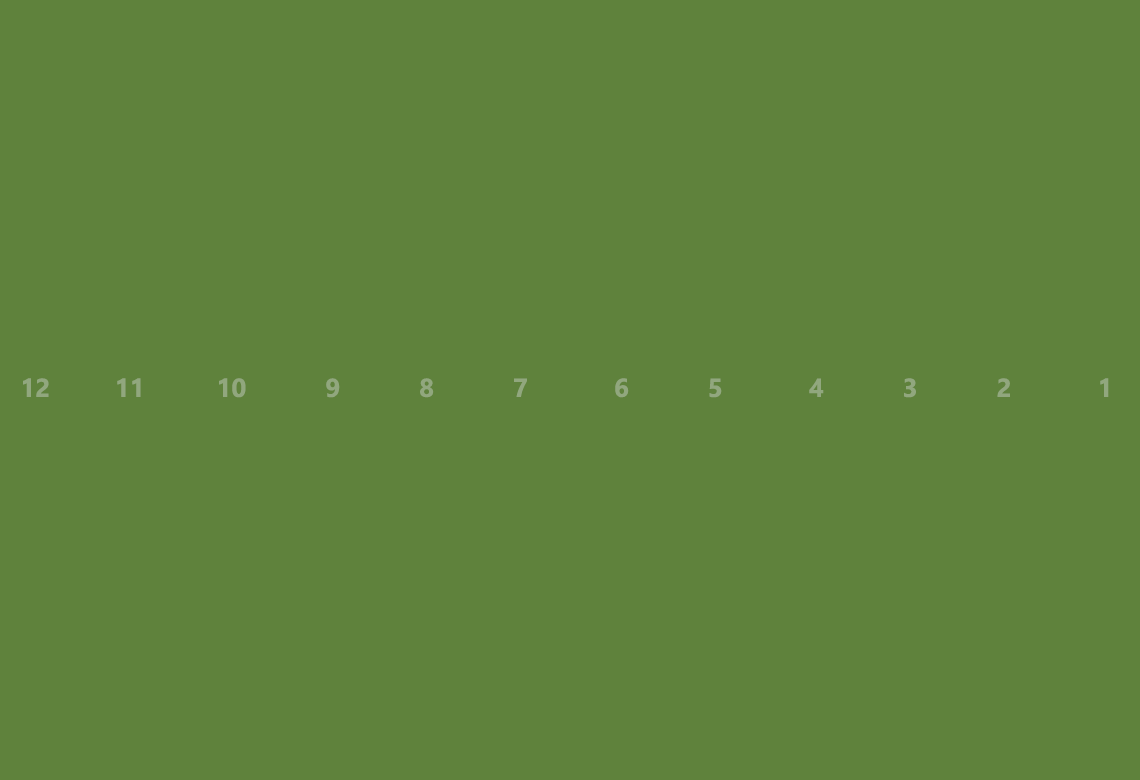
<style>
.page{position:relative;width:1140px;height:780px;background:#5f823c}
.page>*{position:absolute;margin:0}
.t1{font:26px "NirmalaUI-Bold";color:#91a77e}
</style>
<div class="page">
<p class="t1" style="left:23px;top:378px;width:1086px;height:20px">1            2           3           4            5           6            7           8           9           10          11         12</p>
</div>
